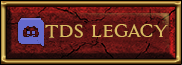
<style>
.page{position:relative;width:182px;height:65px}
.page>*{position:absolute;margin:0}
.t1{font:19px "Assassin$";letter-spacing:-0.005em;color:#daba62;text-transform:uppercase}
</style>
<div class="page">
<p class="t1" style="left:45px;top:24px;width:123px;height:14px">TDS Legacy</p>
</div>
